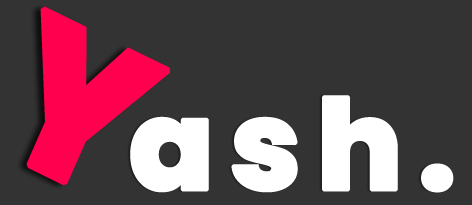
<style>
.page{position:relative;width:472px;height:205px;background:#333333}
.page>*{position:absolute;margin:0}
.t1{font:207.8px "Poppins-ExtraBold";letter-spacing:0.1em;color:#ff004f;font-weight:bold;scale:0.97 1}
.t2{font:125px "Poppins-ExtraBold";letter-spacing:0.1em;color:#ffffff;font-weight:bold}
</style>
<div class="page">
<p class="t1" style="left:26px;top:6px;width:144px;height:180px;rotate:26deg">Y</p>
<p class="t2" style="left:130px;top:95px;width:324px;height:98px">ash.</p>
</div>
